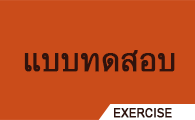
<style>
.page{position:relative;width:195px;height:120px;background:#ca4c1a}
.page>*{position:absolute;margin:0}
.t1{font:32.9px "DokChampa";color:#30130d;font-weight:bold;scale:0.94 1}
.t2{font:11.8px "DokChampa";color:#30130d;font-weight:bold;scale:0.95 1}
</style>
<div class="page">
<p class="t1" style="left:24px;top:50px;width:151px;height:22px">แบบทดสอบ</p>
<p class="t2" style="left:114px;top:108px;width:58px;height:10px">EXERCISE</p>
</div>
